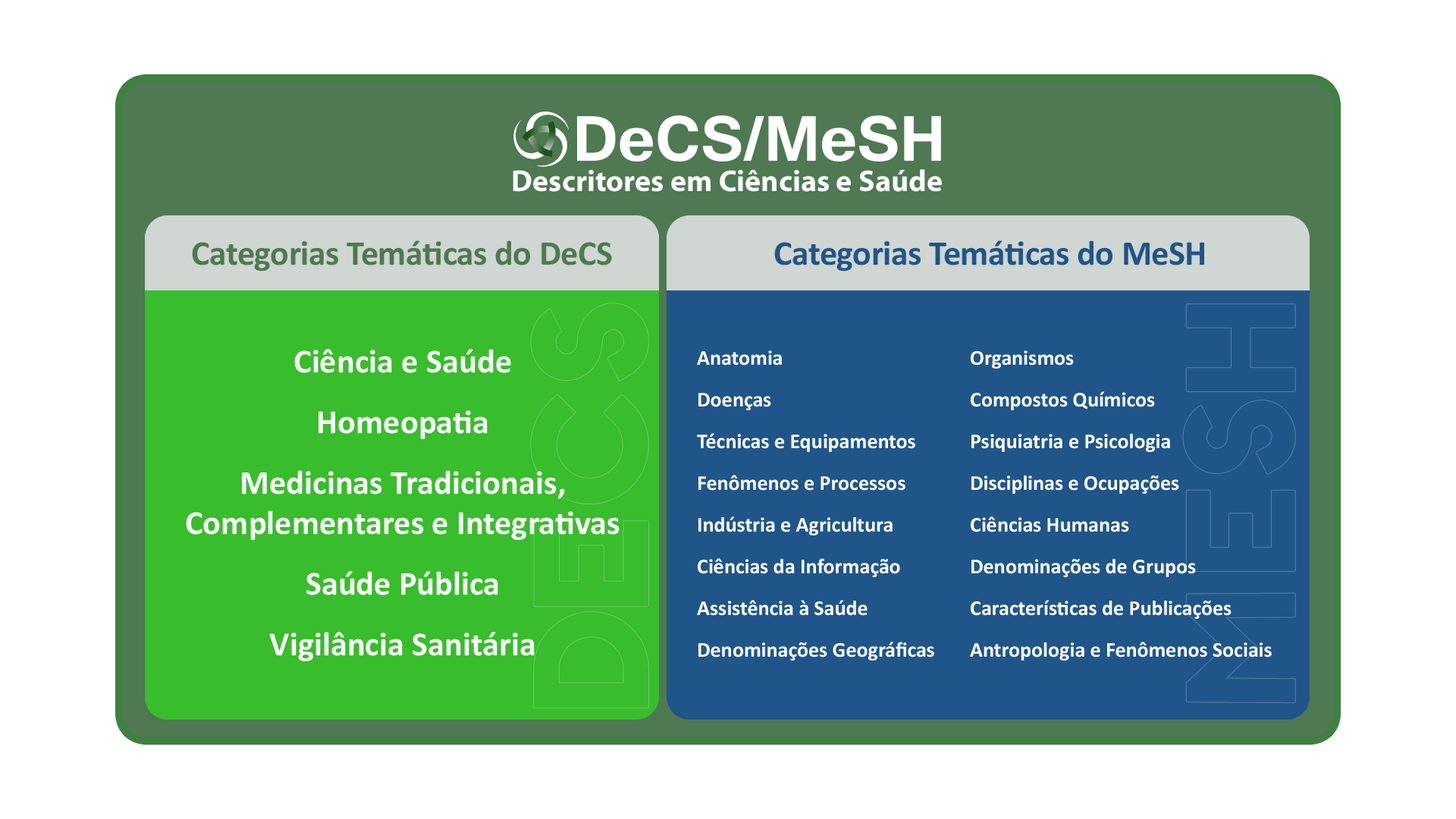
<style>
.page{position:relative;width:1456px;height:819px;background:#ffffff}
.page>*{position:absolute;margin:0}
.t1{font:79.7px "Tunga-Bold";color:#ffffff}
.t2{font:30.3px "MyriadPro-Bold";color:#ffffff}
.t3{font:34.9px "Calibri-Bold";letter-spacing:-0.01em;color:#4e7952}
.t4{font:34.9px "Calibri-Bold";letter-spacing:-0.01em;color:#20558a}
.t5{font:33.7px/60.7px "Calibri-Bold";color:#ffffff}
.t6{font:33.7px "Calibri-Bold";color:#ffffff}
.t7{font:21.2px/41.7px "Calibri-Bold";color:#ffffff}
</style>
<div class="page">
<p class="t1" style="left:577px;top:115px;width:364px;height:47px">DeCS/MeSH</p>
<p class="t2" style="left:513px;top:169px;width:429px;height:23px">Descritores em Ciências e Saúde</p>
<p class="t3" style="left:192px;top:240px;width:420px;height:31px">Categorias Temáticas do DeCS</p>
<p class="t4" style="left:774px;top:240px;width:430px;height:31px">Categorias Temáticas do MeSH</p>
<p class="t5" style="left:186px;top:349px;width:434px;height:312px;text-align:center">Ciência e Saúde<br>Homeopatia<br>Medicinas Tradicionais,<br><span class="t6">Complementares e Integrativas<br></span>Saúde Pública<br>Vigilância Sanitária</p>
<p class="t7" style="left:697px;top:350px;width:575px;height:310px">Anatomia       Organismos<br>Doenças        Compostos Químicos<br>Técnicas e Equipamentos  Psiquiatria e Psicologia<br>Fenômenos e Processos   Disciplinas e Ocupações<br>Indústria e Agricultura   Ciências Humanas<br>Ciências da Informação   Denominações de Grupos<br>Assistência à Saúde    Características de Publicações<br>Denominações Geográficas  Antropologia e Fenômenos Sociais</p>
</div>
